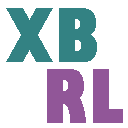
<style>
.page{position:relative;width:128px;height:128px;background:#ffffff}
.page>*{position:absolute;margin:0}
.t1{font:72px "GillSans-UltraBoldCondensed";letter-spacing:0.025em;color:#338283}
.t2{font:72px "GillSans-UltraBoldCondensed";letter-spacing:0.025em;color:#915698}
</style>
<div class="page">
<p class="t1" style="left:6px;top:8px;width:91px;height:54px">XB</p>
<p class="t2" style="left:47px;top:69px;width:76px;height:54px">RL</p>
</div>
